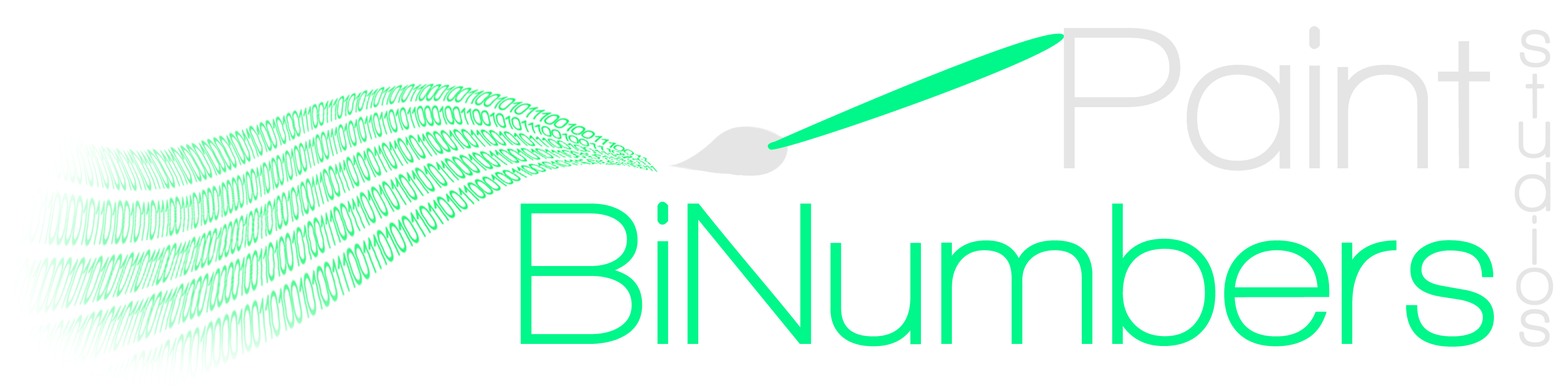
<style>
.page{position:relative;width:1568px;height:392px;background:#ffffff}
.page>*{position:absolute;margin:0}
.t1{font:206.9px "WalkwayBold";color:#dedede}
.t2{font:206.9px "WalkwayBold";letter-spacing:0.01em;color:#00f78a}
</style>
<div class="page">
<p class="t1" style="left:1064px;top:26px;width:426px;height:145px">Paint</p>
<p class="t2" style="left:521px;top:202px;width:973px;height:145px">BiNumbers</p>
</div>
